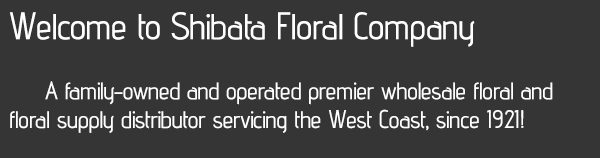
<style>
.page{position:relative;width:600px;height:158px;background:#353535}
.page>*{position:absolute;margin:0}
.t1{font:24px "advent-ExtraBold";color:#ffffff}
.t2{font:36px/60px "advent-ExtraBold";color:#ffffff}
</style>
<div class="page">
<p class="t1" style="left:9px;top:12px;width:544px;height:121px;text-align:right"><span class="t2">Welcome to Shibata Floral Company<br> </span>A family-owned and operated premier wholesale floral and floral supply distributor servicing the West Coast, since 1921!</p>
</div>
